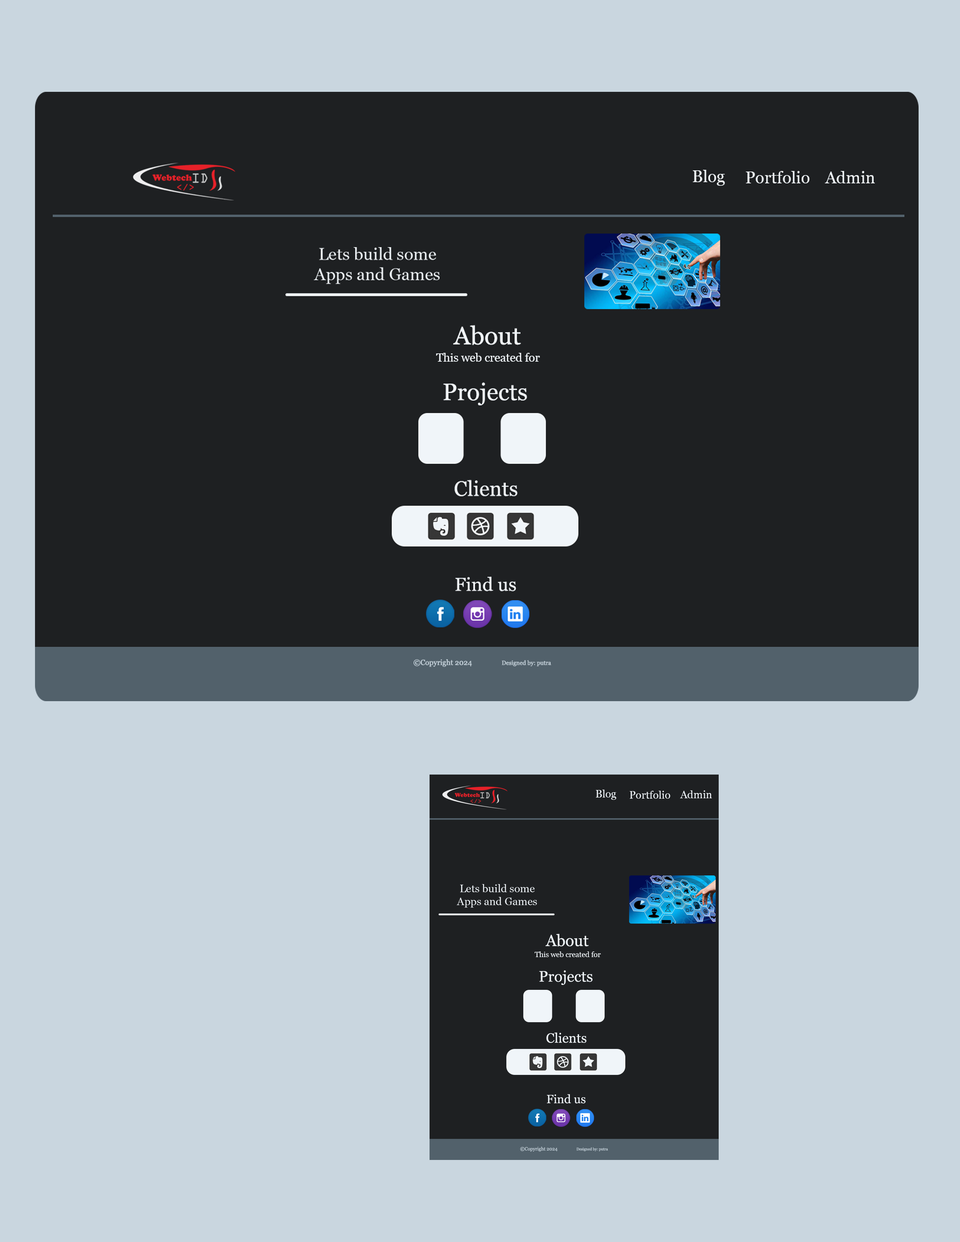
<style>
.page{position:relative;width:960px;height:1242px;background:#c9d6df}
.page>*{position:absolute;margin:0}
.t1{font:10.6px "Georgia";color:#f0f5f9}
.t2{font:15.9px "Georgia";color:#f0f5f9}
.t3{font:7.4px "Georgia";color:#f0f5f9}
.t4{font:4.8px "Georgia";color:#c9d6df}
.t5{font:3.8px "Georgia";color:#c9d6df}
</style>
<div class="page">
<p class="t1" style="left:596px;top:790px;width:20px;height:10px">Blog</p>
<p class="t1" style="left:629px;top:791px;width:41px;height:8px">Portfolio</p>
<p class="t1" style="left:680px;top:791px;width:32px;height:7px">Admin</p>
<p class="t2" style="left:545px;top:934px;width:44px;height:13px">About</p>
<p class="t3" style="left:535px;top:952px;width:66px;height:5px">This web created for</p>
<p class="t4" style="left:520px;top:1147px;width:38px;height:5px">©Copyright 2024</p>
<p class="t5" style="left:576px;top:1147px;width:32px;height:5px">Designed by: putra</p>
</div>
